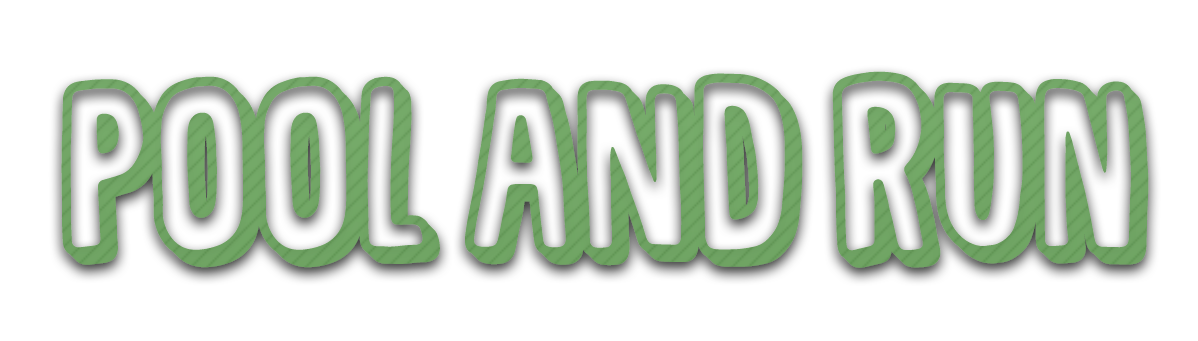
<style>
.page{position:relative;width:1198px;height:341px;background:#ffffff}
.page>*{position:absolute;margin:0}
.t1{font:177px "SugarpunchDEMO";color:#70a464}
</style>
<div class="page">
<p class="t1" style="left:61px;top:71px;width:1088px;height:197px">POOL AND Run</p>
</div>
